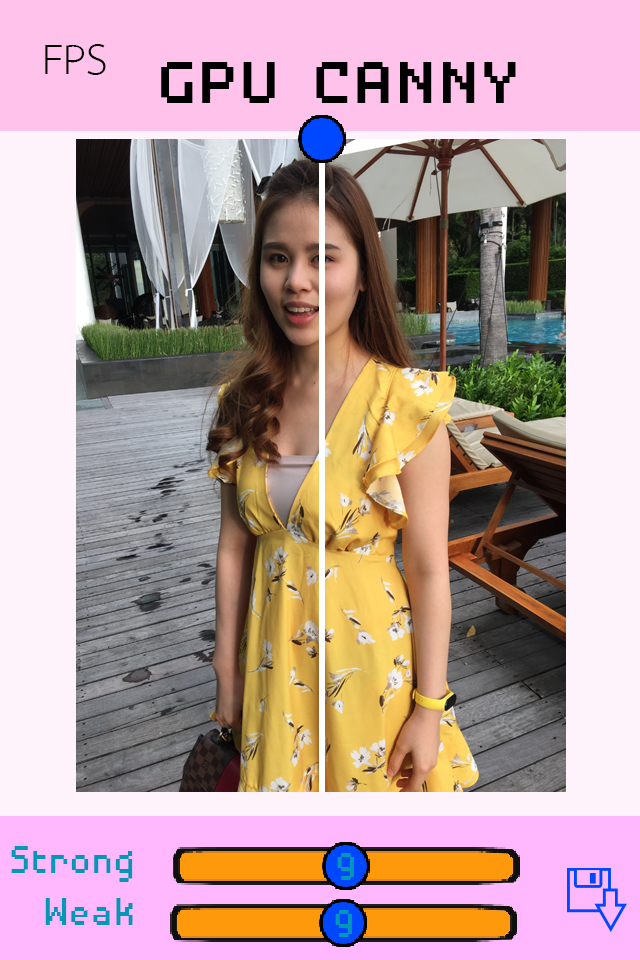
<style>
.page{position:relative;width:640px;height:960px}
.page>*{position:absolute;margin:0}
.t1{font:60.8px "THSarabunPSK";color:#000000}
.t2{font:76.6px "DisposableDroidBB";color:#000000;scale:1.14 1}
.t3{font:49.7px "DisposableDroidBB";color:#0097b8;scale:0.92 1}
</style>
<div class="page">
<p class="t1" style="left:45px;top:44px;width:61px;height:31px">FPS</p>
<p class="t2" style="left:161px;top:62px;width:355px;height:41px">GPU CANNY</p>
<p class="t3" style="left:11px;top:846px;width:122px;height:36px">Strong</p>
<p class="t3" style="left:337px;top:853px;width:17px;height:27px">9</p>
<p class="t3" style="left:45px;top:898px;width:88px;height:27px">Weak</p>
<p class="t3" style="left:335px;top:910px;width:17px;height:27px">9</p>
</div>
